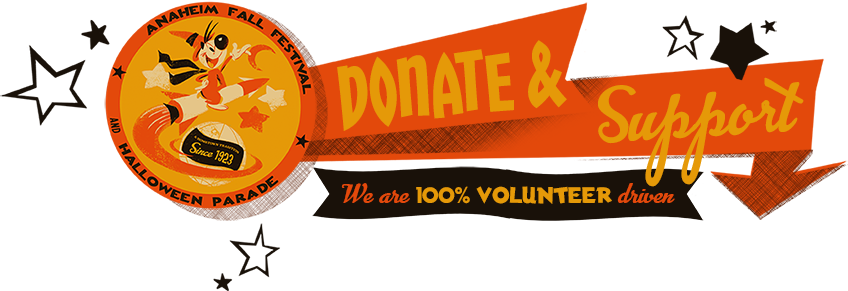
<style>
.page{position:relative;width:848px;height:291px;background:#ffffff}
.page>*{position:absolute;margin:0}
.t1{font:72.6px "ChickweedTitling-Regular";color:#e59908}
.t2{font:61.6px "AdvertisingScript-Bold";color:#e59908}
.t3{font:22.9px "AndersonTorchyTheBatteryBoy";color:#e59908}
.t4{font:22.9px "AdvertisingScript-Bold";color:#e3490b}
</style>
<div class="page">
<p class="t1" style="left:337px;top:40px;width:230px;height:91px;rotate:-6deg">DONATE &amp;</p>
<p class="t2" style="left:598px;top:77px;width:206px;height:110px;rotate:-4deg">Support</p>
<p class="t3" style="left:341px;top:183px;width:334px;height:21px"><span class="t4">We are </span>100% VOLUNTEER <span class="t4">driven</span></p>
</div>
